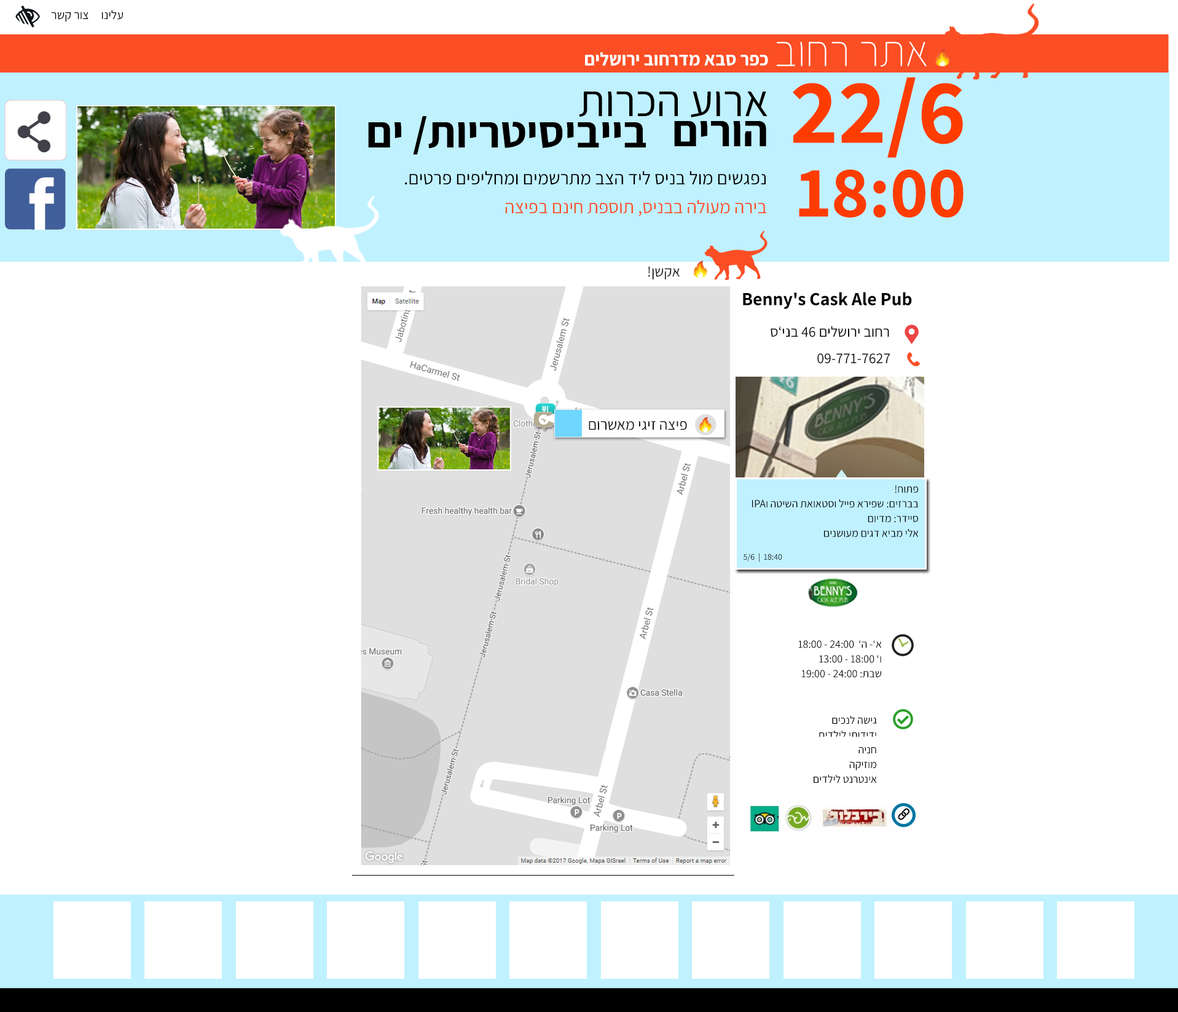
<style>
.page{position:relative;width:1178px;height:1012px;background:#ffffff}
.page>*{position:absolute;margin:0}
.t1{font:12.3px "Assistant-Regular";color:#000000}
.t2{font:44.2px "Assistant-ExtraLight";color:#ffffff}
.t3{font:18.4px "Assistant-Bold";color:#ffffff}
.t4{font:72.5px/73.7px "Assistant-Bold";color:#ff3c00}
.t5{font:92.2px/73.7px "Assistant-Bold";color:#ff3c00}
.t6{font:44.2px "Assistant-Regular";color:#000000}
.t7{font:44.2px "Assistant-Bold";color:#000000}
.t8{font:18.4px "Assistant-Regular";color:#000000}
.t9{font:18.4px "Assistant-Regular";color:#fb4e24}
.t10{font:14.7px "Assistant-Regular";color:#1b1414}
.t11{font:18.4px "Assistant-Bold";color:#010000}
.t12{font:18.4px "MyriadPro-Regular";color:#010000}
.t13{font:14.7px "Assistant-Regular";color:#000000}
.t14{font:15.4px "Assistant-Regular";color:#1b1414}
.t15{font:11.1px/14.7px "Assistant-Regular";color:#000000}
.t16{font:11.1px/73.7px "Assistant-Regular";color:#000000}
.t17{font:8.6px "Assistant-Regular";color:#000000}
.t18{font:14.7px/14.7px "Assistant-Regular";color:#000000}
</style>
<div class="page">
<p class="t1" style="left:52px;top:10px;width:71px;height:12px">עלינו     צור קשר</p>
<p class="t2" style="left:777px;top:42px;width:150px;height:25px">אתר רחוב</p>
<p class="t3" style="left:585px;top:52px;width:183px;height:14px">כפר סבא מדרחוב ירושלים</p>
<p class="t4" style="left:793px;top:77px;width:171px;height:141px"><span class="t5">22/6<br></span>18:00</p>
<p class="t6" style="left:579px;top:92px;width:189px;height:25px">ארוע הכרות</p>
<p class="t7" style="left:368px;top:116px;width:278px;height:39px">בייביסיטריות/ ים</p>
<p class="t7" style="left:674px;top:121px;width:92px;height:25px">הורים</p>
<p class="t8" style="left:405px;top:171px;width:361px;height:14px">נפגשים מול בניס ליד הצב מתרשמים ומחליפים פרטים.</p>
<p class="t9" style="left:505px;top:200px;width:261px;height:16px">בירה מעולה בבניס, תוספת חינם בפיצה</p>
<p class="t10" style="left:648px;top:266px;width:32px;height:14px">אקשן!</p>
<p class="t11" style="left:743px;top:292px;width:169px;height:17px">Benny's Cask Ale Pub<span class="t12">‬</span></p>
<p class="t13" style="left:771px;top:326px;width:118px;height:11px">רחוב ירושלים 46 בני’ס</p>
<p class="t13" style="left:817px;top:353px;width:73px;height:11px">09-771-7627</p>
<p class="t14" style="left:589px;top:421px;width:98px;height:9px">פיצה זיגי מאשרום</p>
<p class="t15" style="left:752px;top:485px;width:167px;height:53px"><span class="t16">פתוח!<br></span>בברזים: שפירא פייל וסטאואת השיטה וIPA<br>סיידר: מדיום<br>אלי מביא דגים מעושנים</p>
<p class="t17" style="left:743px;top:553px;width:39px;height:9px">18:40  |  5/6</p>
<p class="t15" style="left:798px;top:640px;width:84px;height:38px"><span class="t18"><br></span>א’- ה’  24:00 - 18:00<br>ו’ 18:00 - 13:00<br>שבת: 24:00 - 19:00</p>
<p class="t15" style="left:814px;top:716px;width:63px;height:68px">גישה לנכים<br>ידידותי לילדים<br>חניה<br>מוזיקה<br>אינטרנט לילדים</p>
</div>
